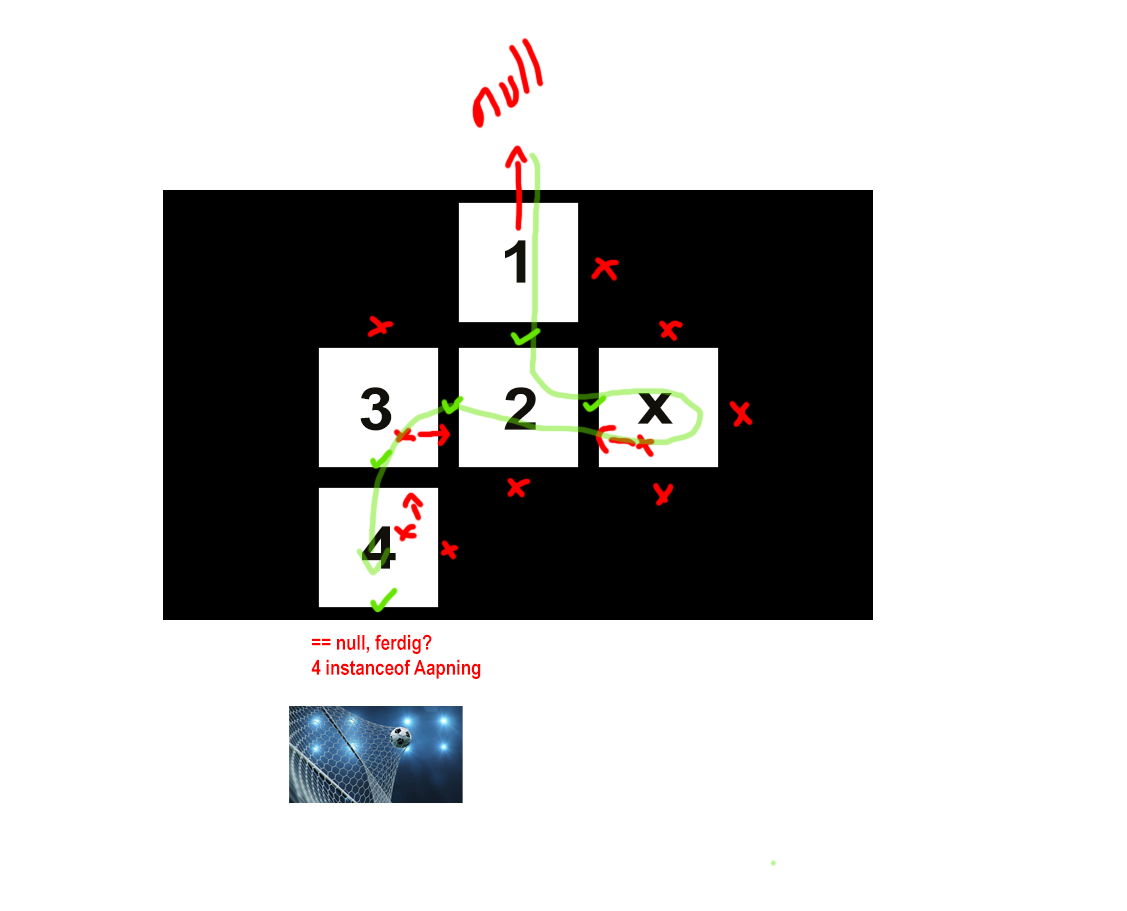
<style>
.page{position:relative;width:1127px;height:911px;background:#ffffff}
.page>*{position:absolute;margin:0}
.t1{font:59.3px "ArialNarrow-Bold";letter-spacing:-0.005em;color:#12100b;scale:1.35 1}
.t2{font:20.8px "ArialNarrow-Bold";letter-spacing:-0.005em;color:#ff0000}
</style>
<div class="page">
<p class="t1" style="left:505px;top:240px;width:21px;height:43px">1</p>
<p class="t1" style="left:360px;top:387px;width:32px;height:44px">3</p>
<p class="t1" style="left:504px;top:387px;width:32px;height:43px">2</p>
<p class="t1" style="left:637px;top:393px;width:36px;height:31px">x</p>
<p class="t1" style="left:362px;top:526px;width:34px;height:43px">4</p>
<p class="t2" style="left:311px;top:634px;width:170px;height:45px">== null, ferdig?<br>4 instanceof Aapning</p>
</div>
